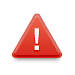
<style>
.page{position:relative;width:75px;height:75px;background:#ffffff}
.page>*{position:absolute;margin:0}
.t1{font:30px "Helvetica-Bold";color:#ffffff}
</style>
<div class="page">
<p class="t1" style="left:34px;top:28px;width:5px;height:22px">!</p>
</div>
